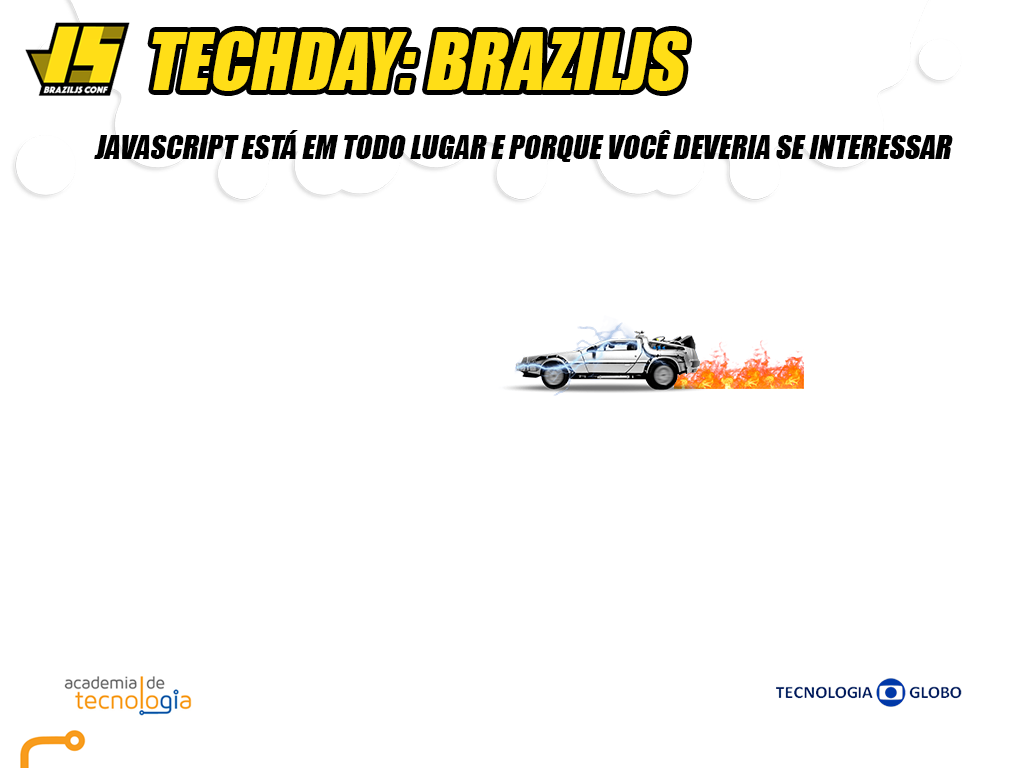
<style>
.page{position:relative;width:1024px;height:768px;background:#ffffff}
.page>*{position:absolute;margin:0}
.t1{font:73px "Impact";color:#ffde17;text-transform:uppercase;font-style:italic}
.t2{font:30px "Impact";color:#000000;text-transform:uppercase;font-style:italic}
</style>
<div class="page">
<p class="t1" style="left:152px;top:31px;width:535px;height:60px">TechDay: braziljs</p>
<p class="t2" style="left:94px;top:130px;width:859px;height:32px">Javascript está em todo lugar e porque você deveria se interessar</p>
</div>
